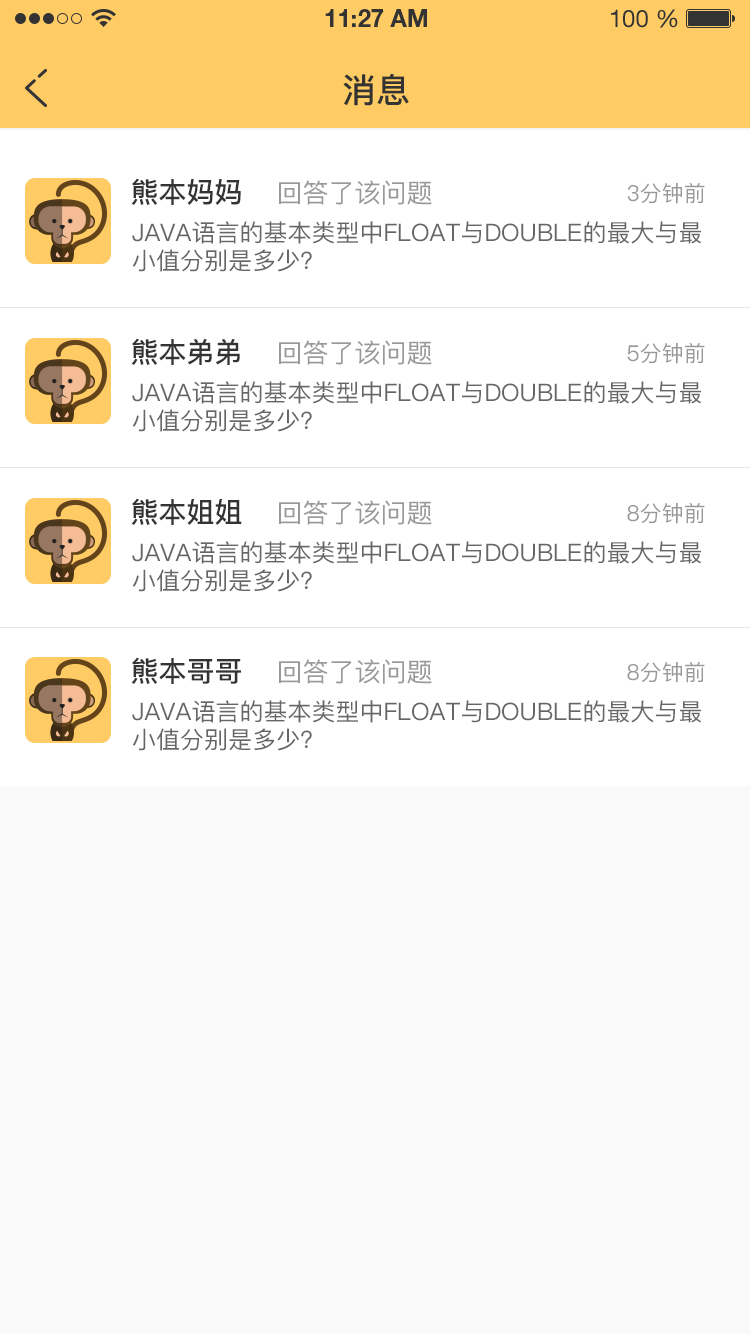
<style>
.page{position:relative;width:750px;height:1334px;background:#ffffff}
.page>*{position:absolute;margin:0}
.t1{font:34px "PingFang-SC-Bold";color:#333333;text-transform:uppercase}
.t2{font:26px "PingFang-SC-Medium";color:#999999;text-transform:uppercase}
.t3{font:28px "PingFang-SC-Bold";color:#333333;text-transform:uppercase}
.t4{font:22px "PingFang-SC-Medium";color:#999999;text-transform:uppercase}
.t5{font:24px/28px "PingFang-SC-Medium";color:#666666;text-transform:uppercase}
</style>
<div class="page">
<p class="t1" style="left:343px;top:73px;width:66px;height:33px">消息</p>
<p class="t2" style="left:131px;top:178px;width:301px;height:27px"><span class="t3">熊本妈妈   </span>回答了该问题</p>
<p class="t4" style="left:627px;top:183px;width:78px;height:21px">3分钟前</p>
<p class="t5" style="left:132px;top:221px;width:569px;height:51px">java语言的基本类型中float与double的最大与最<br>小值分别是多少?</p>
<p class="t2" style="left:131px;top:338px;width:301px;height:27px"><span class="t3">熊本弟弟   </span>回答了该问题</p>
<p class="t4" style="left:627px;top:343px;width:78px;height:21px">5分钟前</p>
<p class="t5" style="left:132px;top:381px;width:569px;height:51px">java语言的基本类型中float与double的最大与最<br>小值分别是多少?</p>
<p class="t2" style="left:131px;top:498px;width:301px;height:27px"><span class="t3">熊本姐姐   </span>回答了该问题</p>
<p class="t4" style="left:627px;top:503px;width:78px;height:21px">8分钟前</p>
<p class="t5" style="left:132px;top:541px;width:569px;height:51px">java语言的基本类型中float与double的最大与最<br>小值分别是多少?</p>
<p class="t2" style="left:131px;top:657px;width:301px;height:27px"><span class="t3">熊本哥哥   </span>回答了该问题</p>
<p class="t4" style="left:627px;top:662px;width:78px;height:21px">8分钟前</p>
<p class="t5" style="left:132px;top:700px;width:569px;height:51px">java语言的基本类型中float与double的最大与最<br>小值分别是多少?</p>
</div>
